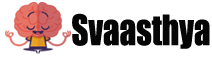
<style>
.page{position:relative;width:212px;height:60px;background:#ffffff}
.page>*{position:absolute;margin:0}
.t1{font:38.7px "Impact";color:#060606;scale:0.85 1}
</style>
<div class="page">
<p class="t1" style="left:72px;top:13px;width:138px;height:36px">Svaasthya</p>
</div>
